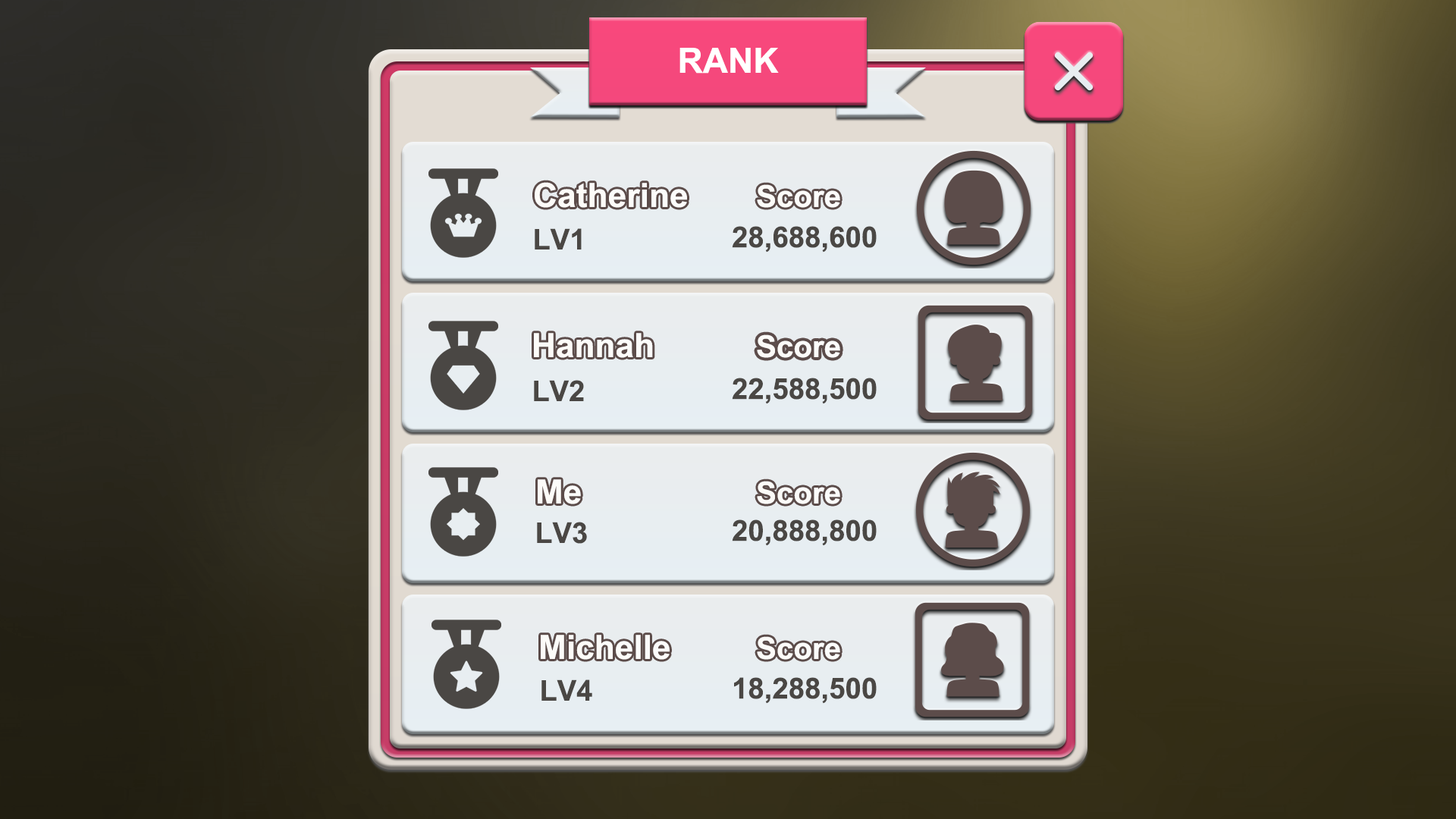
<style>
.page{position:relative;width:1456px;height:819px}
.page>*{position:absolute;margin:0}
.t1{font:34.9px "Arial-BoldMT";color:#ffffff}
.t2{font:33.4px "Arial-BoldMT";color:#ffffff}
.t3{font:30.3px "Arial-BoldMT";color:#ffffff}
.t4{font:28.8px "Arial-BoldMT";color:#4a4744}
.t5{font:28.9px "Arial-BoldMT";color:#4a4744}
</style>
<div class="page">
<p class="t1" style="left:679px;top:48px;width:100px;height:26px">RANK</p>
<p class="t2" style="left:535px;top:182px;width:152px;height:26px">Catherine</p>
<p class="t3" style="left:757px;top:184px;width:83px;height:24px">Score</p>
<p class="t4" style="left:535px;top:228px;width:47px;height:21px">LV1</p>
<p class="t5" style="left:732px;top:226px;width:145px;height:27px">28,688,600</p>
<p class="t2" style="left:534px;top:333px;width:119px;height:25px">Hannah</p>
<p class="t3" style="left:757px;top:334px;width:83px;height:24px">Score</p>
<p class="t5" style="left:732px;top:378px;width:145px;height:26px">22,588,500</p>
<p class="t4" style="left:534px;top:380px;width:50px;height:21px">LV2</p>
<p class="t2" style="left:538px;top:479px;width:43px;height:25px">Me</p>
<p class="t3" style="left:757px;top:481px;width:83px;height:23px">Score</p>
<p class="t4" style="left:537px;top:522px;width:50px;height:22px">LV3</p>
<p class="t5" style="left:732px;top:519px;width:145px;height:27px">20,888,800</p>
<p class="t2" style="left:541px;top:635px;width:129px;height:25px">Michelle</p>
<p class="t3" style="left:757px;top:636px;width:83px;height:24px">Score</p>
<p class="t5" style="left:734px;top:677px;width:143px;height:27px">18,288,500</p>
<p class="t4" style="left:541px;top:679px;width:51px;height:22px">LV4</p>
</div>
